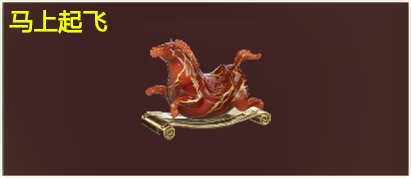
<style>
.page{position:relative;width:411px;height:178px}
.page>*{position:absolute;margin:0}
.t1{font:24px "MicrosoftYaHeiUI";color:#f4ff00;font-weight:bold}
</style>
<div class="page">
<p class="t1" style="left:9px;top:10px;width:99px;height:24px">马上起飞</p>
</div>
